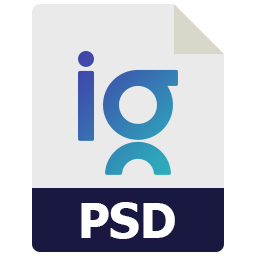
<style>
.page{position:relative;width:256px;height:256px;background:#eaeaea}
.page>*{position:absolute;margin:0}
.t1{font:48px "Tahoma-Bold";color:#ffffff}
</style>
<div class="page">
<p class="t1" style="left:81px;top:202px;width:94px;height:37px">PSD</p>
</div>
